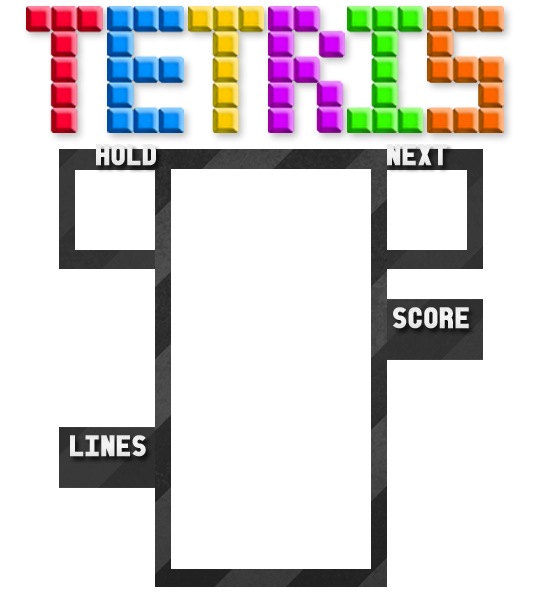
<style>
.page{position:relative;width:540px;height:600px;background:#ffffff}
.page>*{position:absolute;margin:0}
.t1{font:20.8px "Old-Block-Black";letter-spacing:-0.07em;color:#eeeeee;font-weight:bold}
.t2{font:20.8px "Old-Block-Black";letter-spacing:-0.07em;color:#ededed;font-weight:bold}
</style>
<div class="page">
<p class="t1" style="left:96px;top:144px;width:60px;height:22px">HOLD</p>
<p class="t2" style="left:387px;top:144px;width:60px;height:22px">NEXT</p>
<p class="t2" style="left:393px;top:307px;width:76px;height:22px">SCORE</p>
<p class="t2" style="left:70px;top:435px;width:76px;height:22px">LINES</p>
</div>
